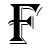
<style>
.page{position:relative;width:48px;height:48px;background:#ffffff}
.page>*{position:absolute;margin:0}
.t1{font:60px "Algerian";color:#000000}
</style>
<div class="page">
<p class="t1" style="left:8px;top:4px;width:35px;height:40px">F</p>
</div>
